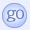
<style>
.page{position:relative;width:30px;height:30px;background:#ecf0fc}
.page>*{position:absolute;margin:0}
.t1{font:18px "By-JOSSQ-DMF-in-BeiJing";color:#6b80be}
</style>
<div class="page">
<p class="t1" style="left:6px;top:9px;width:18px;height:13px">go</p>
</div>
